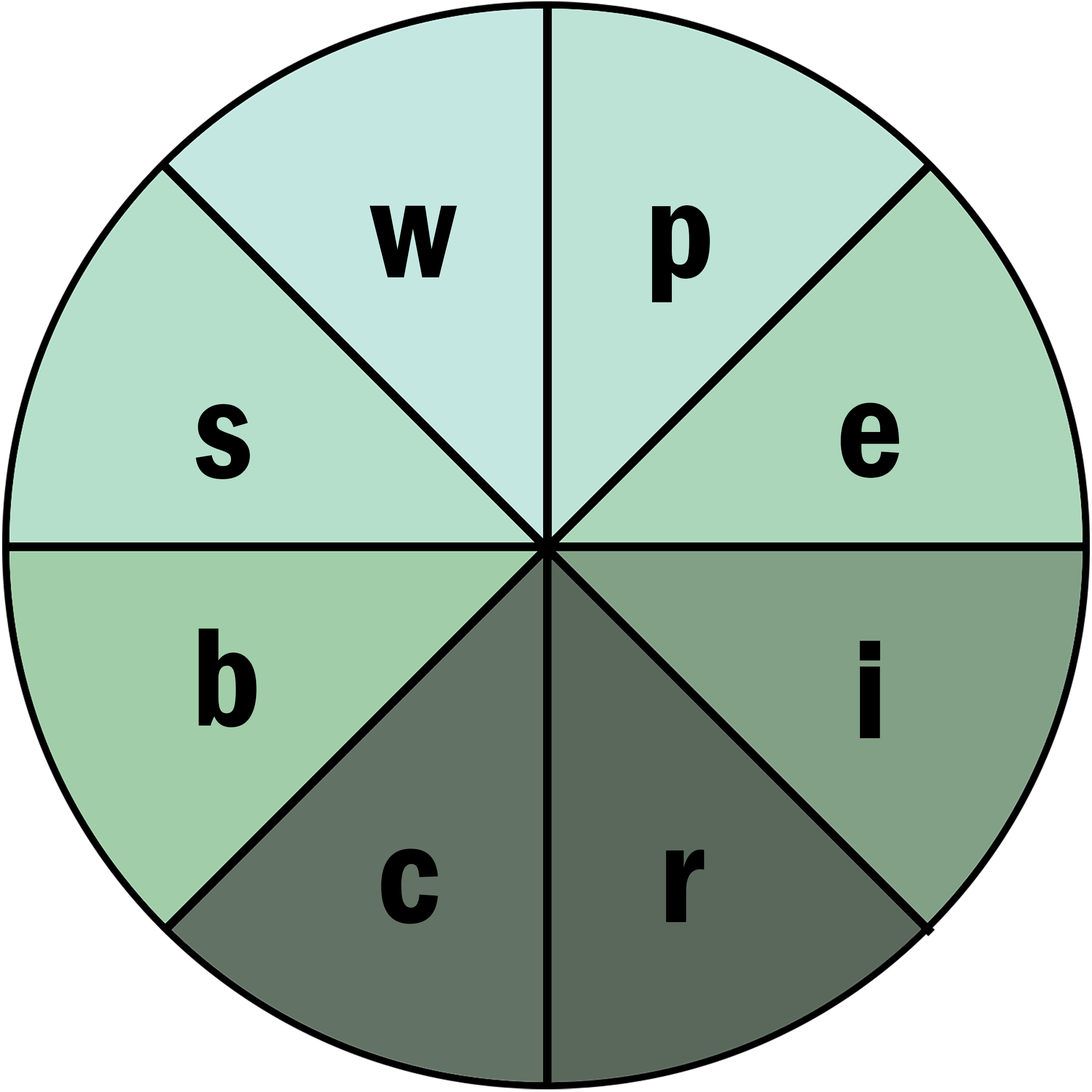
<style>
.page{position:relative;width:1092px;height:1092px;background:#ffffff}
.page>*{position:absolute;margin:0}
.t1{font:145.6px "FranklinGothic-DemiCond";color:#000000}
</style>
<div class="page">
<p class="t1" style="left:370px;top:206px;width:87px;height:71px">w</p>
<p class="t1" style="left:652px;top:205px;width:58px;height:97px">p</p>
<p class="t1" style="left:196px;top:404px;width:54px;height:75px">s</p>
<p class="t1" style="left:840px;top:403px;width:59px;height:75px">e</p>
<p class="t1" style="left:198px;top:629px;width:59px;height:98px">b</p>
<p class="t1" style="left:860px;top:641px;width:20px;height:97px">i</p>
<p class="t1" style="left:381px;top:849px;width:57px;height:75px">c</p>
<p class="t1" style="left:666px;top:850px;width:38px;height:72px">r</p>
</div>
